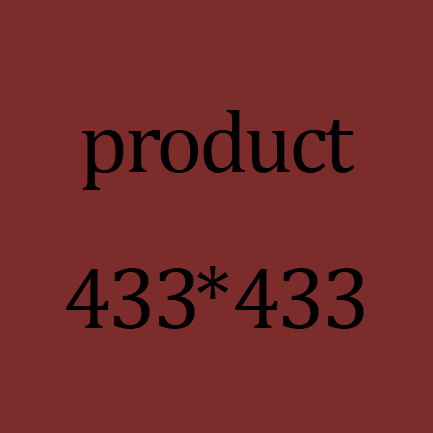
<style>
.page{position:relative;width:433px;height:433px;background:#7d2c2c}
.page>*{position:absolute;margin:0}
.t1{font:87.5px/155.3px "CambriaMath";letter-spacing:-0.04em;color:#000000}
</style>
<div class="page">
<p class="t1" style="left:66px;top:110px;width:298px;height:219px;text-align:center">product<br>433*433</p>
</div>
